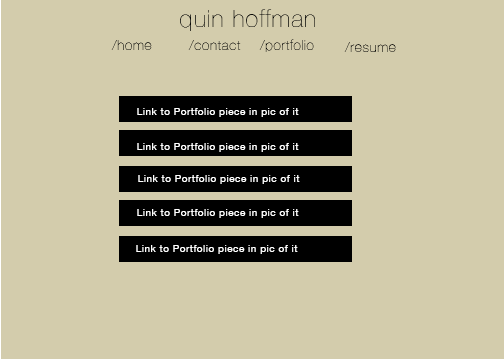
<style>
.page{position:relative;width:504px;height:360px;background:#d3ccac}
.page>*{position:absolute;margin:0}
.t1{font:24px "HelveticaNeue-UltraLight";letter-spacing:0.05em;color:#0b0c0a}
.t2{font:14px "HelveticaNeue-UltraLight";letter-spacing:0.05em}
.t3{font:14px "HelveticaNeue-UltraLight";letter-spacing:0.05em;color:#0b0c0a}
.t4{font:10px "HelveticaNeue";letter-spacing:0.05em;color:#ffffff}
</style>
<div class="page">
<p class="t1" style="left:180px;top:9px;width:135px;height:22px">quin hoffman</p>
<p class="t2" style="left:111px;top:40px;width:41px;height:10px">/home</p>
<p class="t2" style="left:188px;top:40px;width:53px;height:10px">/contact</p>
<p class="t3" style="left:259px;top:39px;width:55px;height:13px">/portfolio</p>
<p class="t3" style="left:344px;top:42px;width:52px;height:10px">/resume</p>
<p class="t4" style="left:137px;top:108px;width:162px;height:9px">Link to Portfolio piece in pic of it</p>
<p class="t4" style="left:137px;top:143px;width:162px;height:9px">Link to Portfolio piece in pic of it</p>
<p class="t4" style="left:138px;top:175px;width:162px;height:9px">Link to Portfolio piece in pic of it</p>
<p class="t4" style="left:137px;top:209px;width:162px;height:9px">Link to Portfolio piece in pic of it</p>
<p class="t4" style="left:136px;top:245px;width:162px;height:9px">Link to Portfolio piece in pic of it</p>
</div>
